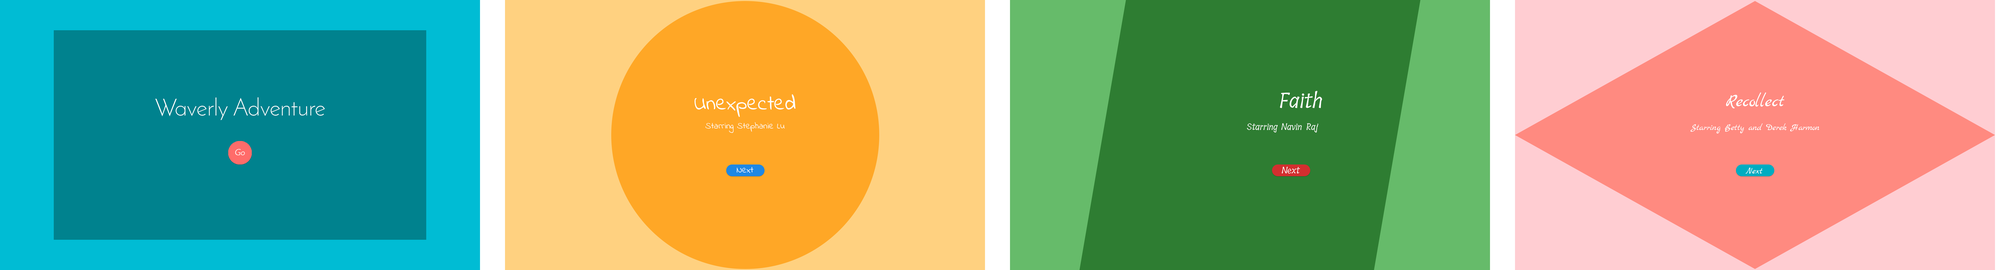
<style>
.page{position:relative;width:2016px;height:270px}
.page>*{position:absolute;margin:0}
.t1{font:24px "JosefinSans-Light";color:#ffffff}
.t2{font:21px "IndieFlower";color:#ffffff}
.t3{font:21px "Tillana-Regular";color:#ffffff}
.t4{font:18px "MarckScript-Regular";color:#ffffff}
.t5{font:9px "IndieFlower";color:#ffffff}
.t6{font:9px "Tillana-Regular";color:#ffffff}
.t7{font:9px "MarckScript-Regular";color:#ffffff}
.t8{font:9px "JosefinSans";color:#ffffff}
</style>
<div class="page">
<p class="t1" style="left:155px;top:97px;width:170px;height:23px">Waverly Adventure</p>
<p class="t2" style="left:694px;top:94px;width:102px;height:23px">Unexpected</p>
<p class="t3" style="left:1280px;top:91px;width:42px;height:17px">Faith</p>
<p class="t4" style="left:1726px;top:92px;width:58px;height:16px">Recollect</p>
<p class="t5" style="left:705px;top:122px;width:80px;height:11px">Starring Stephanie Lu</p>
<p class="t6" style="left:1247px;top:123px;width:71px;height:9px">Starring Navin Raj</p>
<p class="t7" style="left:1690px;top:123px;width:130px;height:11px">Starring Betty and Derek Harmon</p>
<p class="t8" style="left:235px;top:149px;width:10px;height:6px">Go</p>
<p class="t5" style="left:737px;top:167px;width:17px;height:6px">Next</p>
<p class="t6" style="left:1282px;top:167px;width:18px;height:7px">Next</p>
<p class="t7" style="left:1746px;top:168px;width:16px;height:6px">Next</p>
</div>
